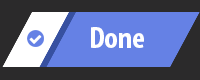
<style>
.page{position:relative;width:200px;height:80px;background:#2b2a2b}
.page>*{position:absolute;margin:0}
.t1{font:31.1px "MyriadPro-BoldCond";color:#ffffff}
</style>
<div class="page">
<p class="t1" style="left:91px;top:27px;width:53px;height:21px">Done</p>
</div>
